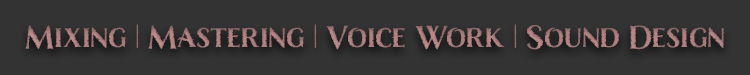
<style>
.page{position:relative;width:750px;height:75px;background:#333333}
.page>*{position:absolute;margin:0}
.t1{font:30px "Nelson-Bold";color:#ad7e7e}
</style>
<div class="page">
<p class="t1" style="left:25px;top:24px;width:700px;height:26px">Mixing | Mastering | Voice Work | Sound Design</p>
</div>
